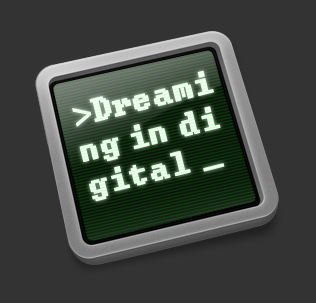
<style>
.page{position:relative;width:316px;height:303px;background:#333333}
.page>*{position:absolute;margin:0}
.t1{font:30px "TerminalVector";color:#eaffea;font-weight:bold}
.t2{font:30px "AdobeHeitiStd-Regular";color:#eaffea;font-weight:bold}
</style>
<div class="page">
<p class="t1" style="left:72px;top:70px;width:153px;height:132px;rotate:-14deg"><span class="t2">&gt;</span>Dreami<br>ng in di<br>gital _</p>
</div>
